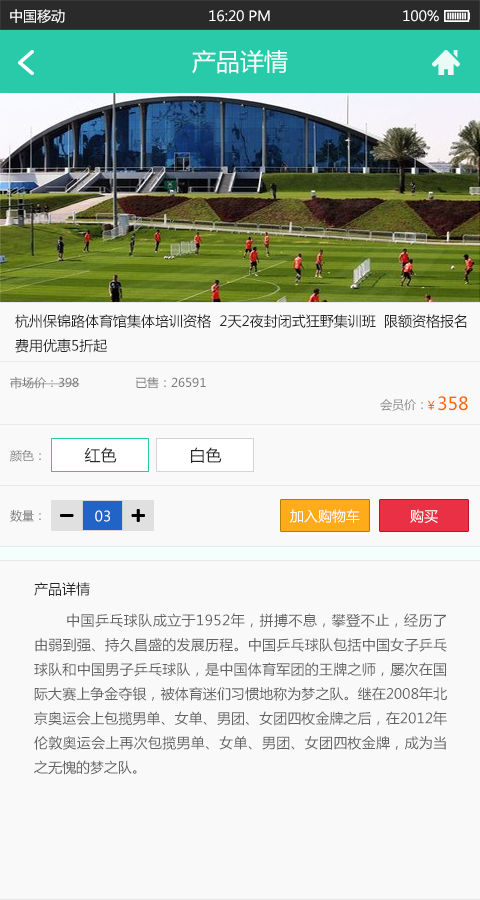
<style>
.page{position:relative;width:480px;height:900px;background:#f9f9f9}
.page>*{position:absolute;margin:0}
.t1{font:14px "MicrosoftYaHei";color:#ffffff}
.t2{font:24px "MicrosoftYaHei";color:#f4fffd}
.t3{font:14px "MicrosoftYaHei";color:#252525}
.t4{font:12px "MicrosoftYaHei";color:#7d7d7b}
.t5{font:12px "MicrosoftYaHei";color:#7d7d7d}
.t6{font:12px "MicrosoftYaHei";color:#878787}
.t7{font:18px "MicrosoftYaHei";color:#fe6600}
.t8{font:12px "MicrosoftYaHei";color:#fe6600}
.t9{font:16px "MicrosoftYaHei";color:#252525}
.t10{font:14px "MicrosoftYaHei";color:#626262}
</style>
<div class="page">
<p class="t1" style="left:10px;top:9px;width:55px;height:14px">中国移动</p>
<p class="t1" style="left:209px;top:10px;width:61px;height:12px">16:20 PM</p>
<p class="t1" style="left:403px;top:10px;width:36px;height:12px">100%</p>
<p class="t2" style="left:192px;top:50px;width:96px;height:24px">产品详情</p>
<p class="t3" style="left:15px;top:314px;width:452px;height:39px">杭州保锦路体育馆集体培训资格  2天2夜封闭式狂野集训班  限额资格报名<br>费用优惠5折起</p>
<p class="t4" style="left:10px;top:376px;width:70px;height:13px">市场价：398</p>
<p class="t5" style="left:136px;top:377px;width:70px;height:12px">已售：26591</p>
<p class="t6" style="left:380px;top:399px;width:43px;height:12px">会员价：</p>
<p class="t7" style="left:427px;top:396px;width:41px;height:15px"><span class="t8">￥</span>358</p>
<p class="t9" style="left:84px;top:447px;width:33px;height:16px">红色</p>
<p class="t9" style="left:191px;top:447px;width:31px;height:16px">白色</p>
<p class="t5" style="left:10px;top:450px;width:31px;height:12px">颜色：</p>
<p class="t5" style="left:10px;top:510px;width:31px;height:12px">数量：</p>
<p class="t1" style="left:95px;top:510px;width:15px;height:12px">03</p>
<p class="t1" style="left:290px;top:509px;width:70px;height:14px">加入购物车</p>
<p class="t1" style="left:410px;top:509px;width:28px;height:14px">购买</p>
<p class="t3" style="left:34px;top:582px;width:56px;height:14px">产品详情</p>
<p class="t10" style="left:34px;top:613px;width:413px;height:162px;text-align:justify">中国乒乓球队成立于1952年，拼搏不息，攀登不止，经历了由弱到强、持久昌盛的发展历程。中国乒乓球队包括中国女子乒乓球队和中国男子乒乓球队，是中国体育军团的王牌之师，屡次在国际大赛上争金夺银，被体育迷们习惯地称为梦之队。继在2008年北京奥运会上包揽男单、女单、男团、女团四枚金牌之后，在2012年伦敦奥运会上再次包揽男单、女单、男团、女团四枚金牌，成为当之无愧的梦之队。</p>
</div>
